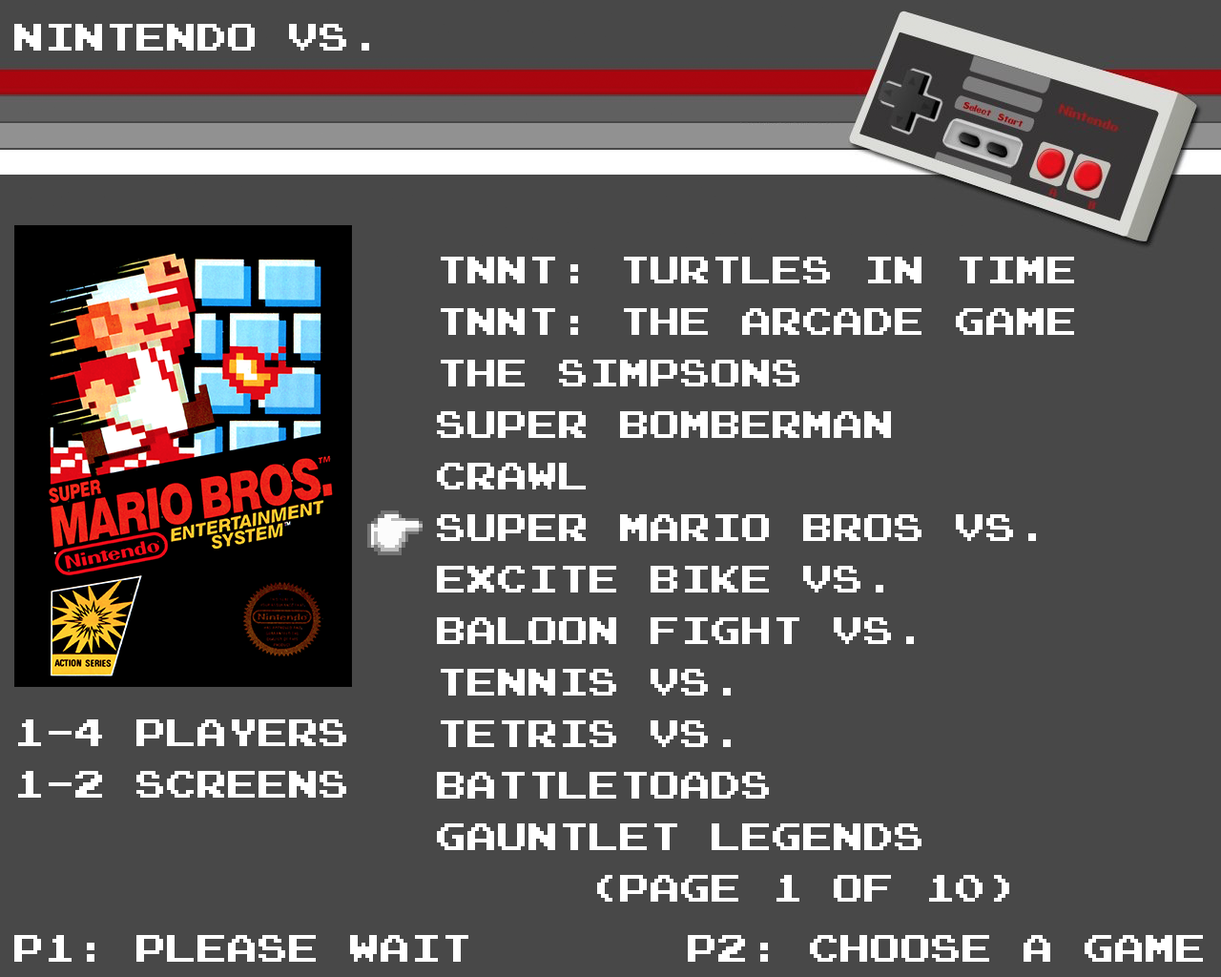
<style>
.page{position:relative;width:1221px;height:977px;background:#484848}
.page>*{position:absolute;margin:0}
.t1{font:30.5px "PressStartK";color:#ffffff}
.t2{font:30.5px/51.5px "PressStartK";color:#ffffff}
</style>
<div class="page">
<p class="t1" style="left:14px;top:24px;width:355px;height:27px">NINTENDO VS.</p>
<p class="t2" style="left:437px;top:257px;width:637px;height:644px">TNNT: TURTLES IN TIME<br>TNNT: THE ARCADE GAME<br>THE SIMPSONS<br>SUPER BOMBERMAN<br>CRAWL<br>SUPER MARIO BROS VS.<br>EXCITE BIKE VS.<br>BALOON FIGHT VS.<br>TENNIS VS.<br>TETRIS VS.<br>BATTLETOADS<br>GAUNTLET LEGENDS<br>     (PAGE 1 OF 10)</p>
<p class="t2" style="left:18px;top:719px;width:328px;height:78px">1-4 PLAYERS<br>1-2 SCREENS</p>
<p class="t1" style="left:14px;top:935px;width:454px;height:26px">P1: PLEASE WAIT</p>
<p class="t1" style="left:688px;top:935px;width:515px;height:26px">P2: CHOOSE A GAME</p>
</div>
